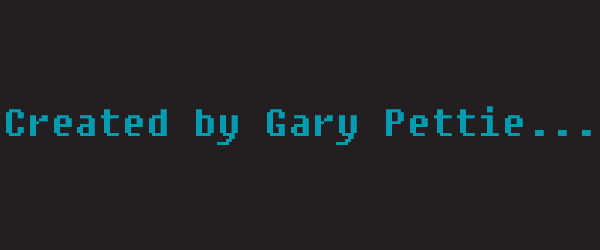
<style>
.page{position:relative;width:600px;height:250px;background:#231f20}
.page>*{position:absolute;margin:0}
.t1{font:38px "Fixedsys";color:#009ab1}
</style>
<div class="page">
<p class="t1" style="left:6px;top:106px;width:585px;height:39px">Created by Gary Pettie...</p>
</div>
